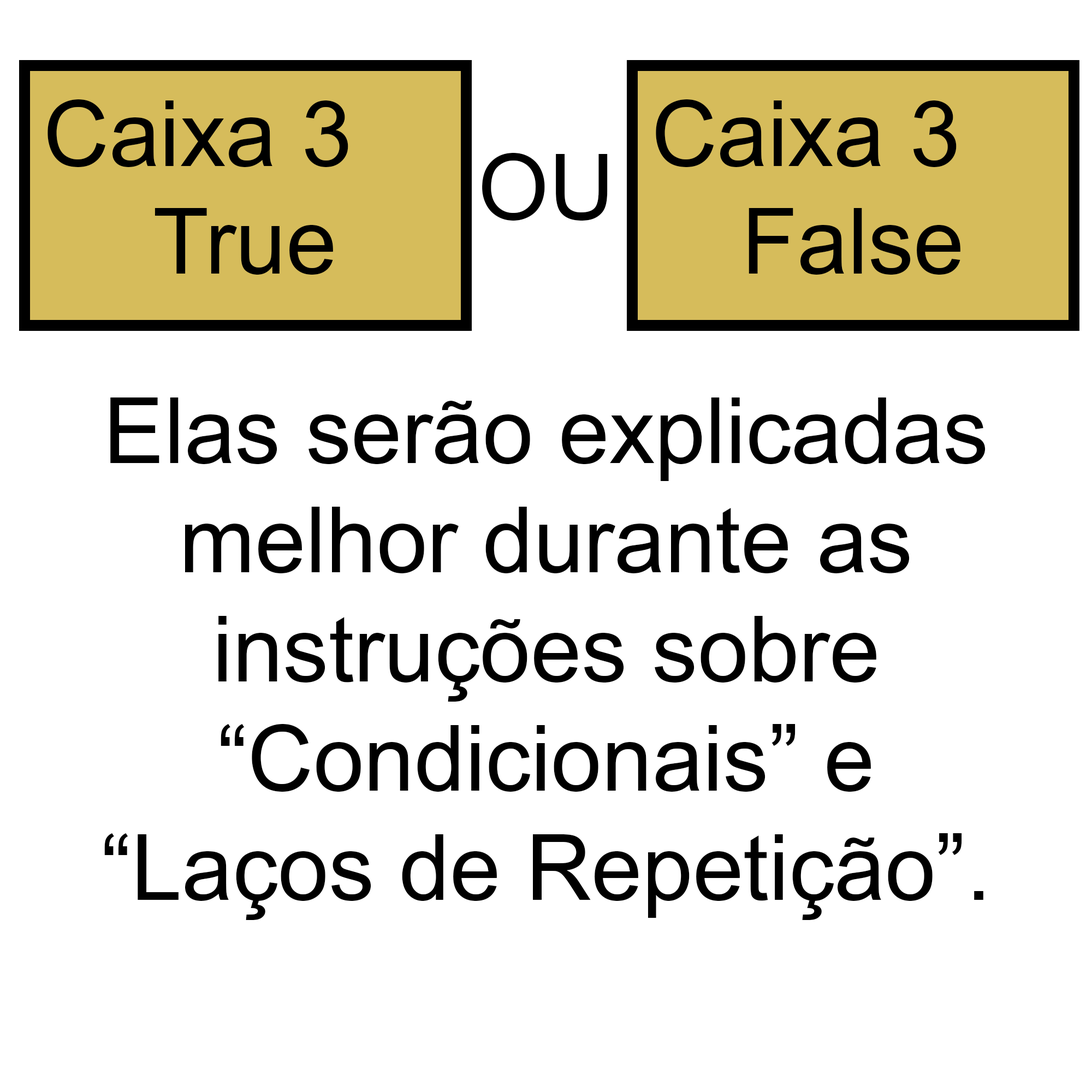
<style>
.page{position:relative;width:1092px;height:1092px;background:#ffffff}
.page>*{position:absolute;margin:0}
.t1{font:91px "ArialMT";color:#000000}
</style>
<div class="page">
<p class="t1" style="left:48px;top:99px;width:300px;height:68px">Caixa 3</p>
<p class="t1" style="left:656px;top:99px;width:301px;height:68px">Caixa 3</p>
<p class="t1" style="left:482px;top:153px;width:126px;height:68px">OU</p>
<p class="t1" style="left:155px;top:208px;width:178px;height:67px">True</p>
<p class="t1" style="left:749px;top:208px;width:211px;height:67px">False</p>
<p class="t1" style="left:104px;top:397px;width:882px;height:523px;text-align:center">Elas serão explicadas<br>melhor durante as<br>instruções sobre<br>“Condicionais” e<br>“Laços de Repetição”.</p>
</div>
